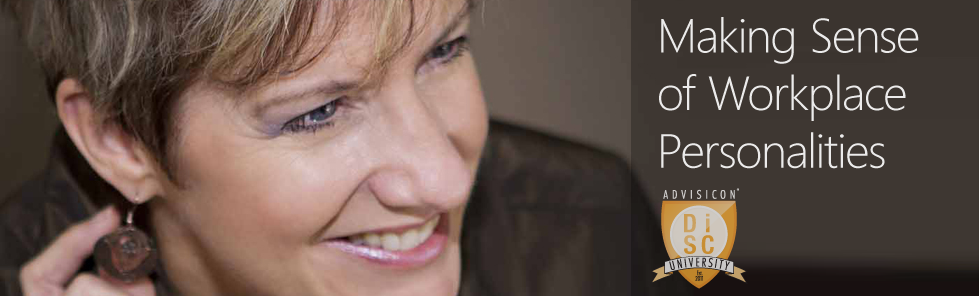
<style>
.page{position:relative;width:979px;height:296px}
.page>*{position:absolute;margin:0}
.t1{font:48px "SegoeUI-Light";letter-spacing:-0.01em;color:#ffffff}
</style>
<div class="page">
<p class="t1" style="left:659px;top:17px;width:260px;height:152px;opacity:0.9">Making Sense of Workplace Personalities</p>
</div>
